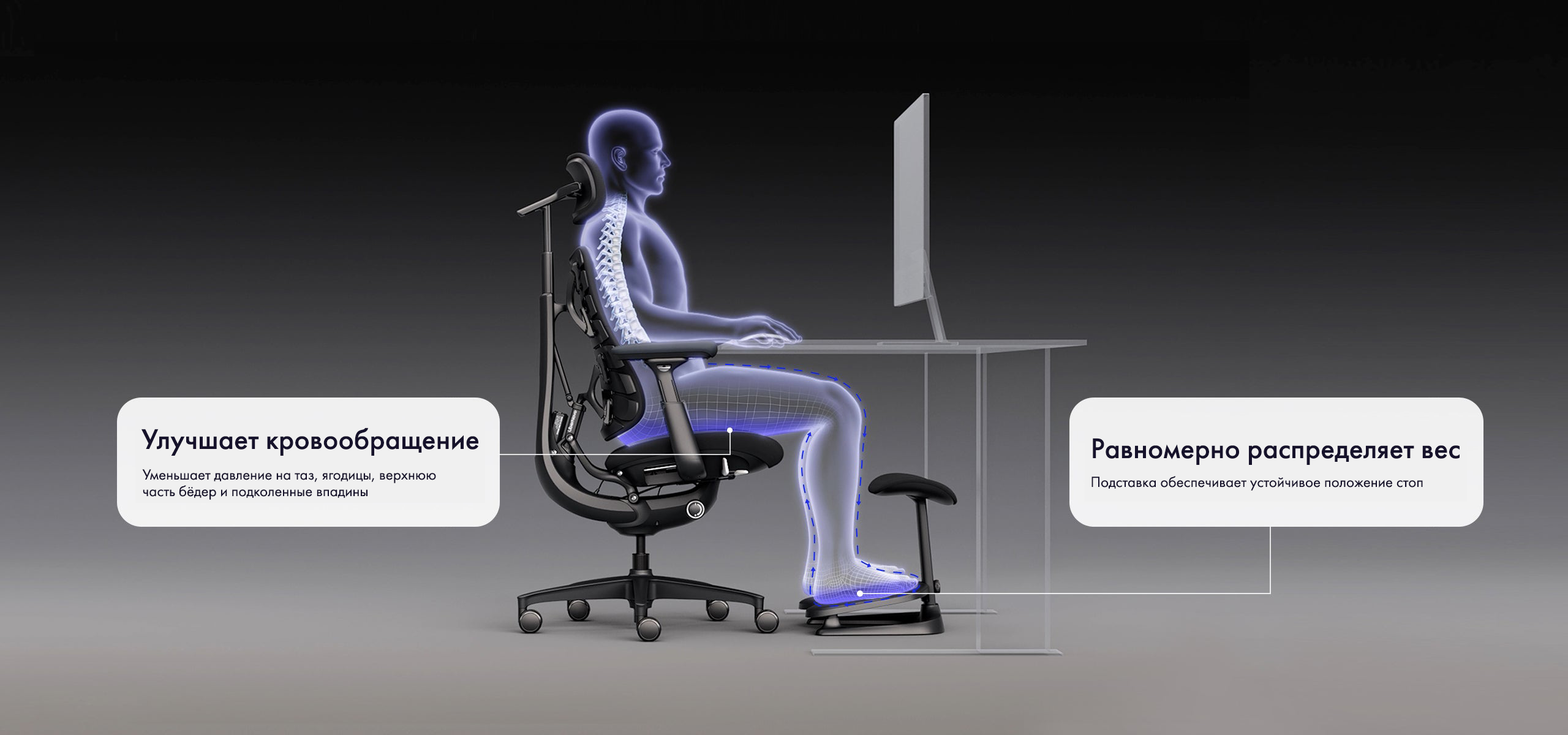
<style>
.page{position:relative;width:1568px;height:735px}
.page>*{position:absolute;margin:0}
.t1{font:29.4px "FuturaPT-Medium";color:#16122b}
.t2{font:15.3px/16.5px "FuturaPT-Book";color:#16122b}
.t3{font:15.3px "FuturaPT-Book";color:#16122b}
</style>
<div class="page">
<p class="t1" style="left:141px;top:428px;width:337px;height:28px">Улучшает кровообращение</p>
<p class="t1" style="left:1093px;top:438px;width:367px;height:27px">Равномерно распределяет вес</p>
<p class="t2" style="left:142px;top:469px;width:294px;height:31px">Уменьшает давление на таз, ягодицы, верхнюю<br>часть бёдер и подколенные впадины</p>
<p class="t3" style="left:1091px;top:476px;width:332px;height:15px">Подставка обеспечивает устойчивое положение стоп</p>
</div>
